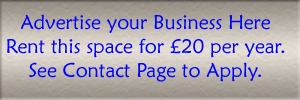
<style>
.page{position:relative;width:300px;height:100px}
.page>*{position:absolute;margin:0}
.t1{font:19.9px "MaiandraGD-Regular";color:#0000ff}
</style>
<div class="page">
<p class="t1" style="left:7px;top:14px;width:278px;height:68px;text-align:center">Advertise your Business Here<br>Rent this space for £20 per year.<br>See Contact Page to Apply.</p>
</div>
